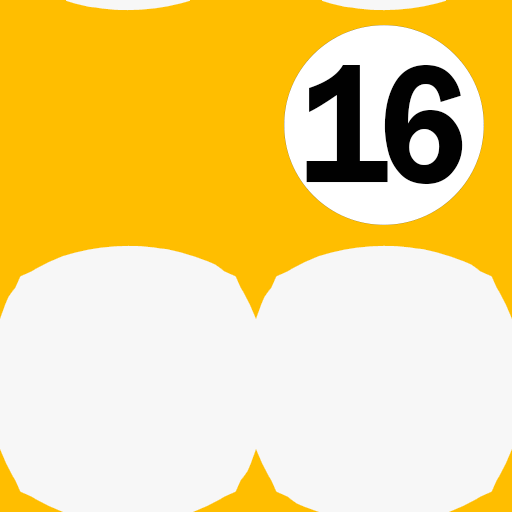
<style>
.page{position:relative;width:512px;height:512px;background:#f7f7f7}
.page>*{position:absolute;margin:0}
.t1{font:172.5px "FranklinGothic-Demi";letter-spacing:-0.05em;color:#010101;scale:0.87 1}
</style>
<div class="page">
<p class="t1" style="left:306px;top:65px;width:157px;height:119px">16</p>
</div>
